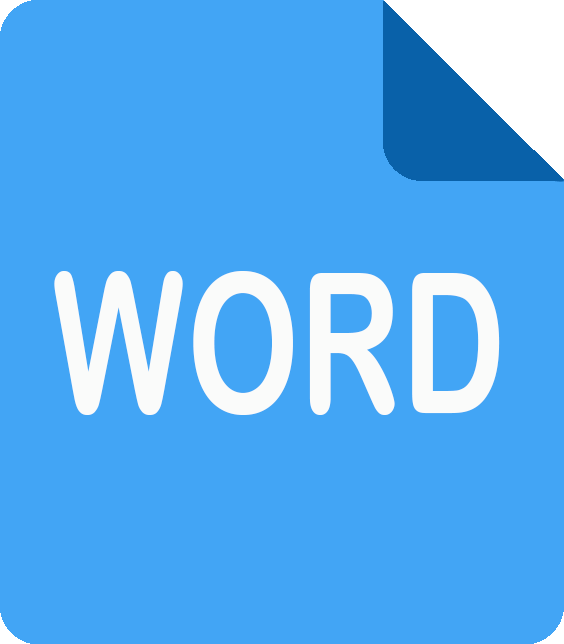
<style>
.page{position:relative;width:564px;height:644px;background:#42a5f5}
.page>*{position:absolute;margin:0}
.t1{font:195.5px "ArialRoundedMTBold";color:#fafbfa;scale:0.72 1}
</style>
<div class="page">
<p class="t1" style="left:54px;top:271px;width:446px;height:144px">WORD</p>
</div>
